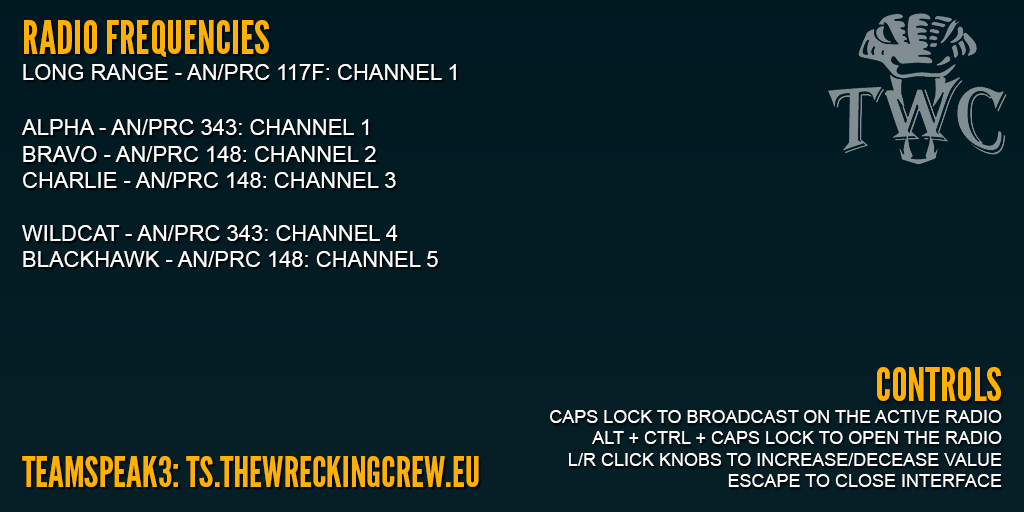
<style>
.page{position:relative;width:1024px;height:512px}
.page>*{position:absolute;margin:0}
.t1{font:22px "ArialMT";color:#ffffff;text-transform:uppercase}
.t2{font:46px "LeagueGothic";color:#feb101;text-transform:uppercase}
.t3{font:18px "ArialMT";color:#ffffff;text-transform:uppercase}
.t4{font:46px/41px "LeagueGothic";color:#feb101;text-transform:uppercase}
.t5{font:42px "LeagueGothic";color:#feb101;text-transform:uppercase}
</style>
<div class="page">
<p class="t1" style="left:22px;top:20px;width:434px;height:247px"><span class="t2">radio frequencies<br></span>long range - an/prc 117f: channel 1<br><br>alpha - AN/prc 343: channel 1<br>bravo - an/prc 148: channel 2<br>charlie - an/prc 148: channel 3<br><br>Wildcat - an/prc 343: channel 4<br>blackhawk - an/prc 148: channel 5</p>
<p class="t3" style="left:550px;top:367px;width:452px;height:120px;text-align:right"><span class="t1"><br><br></span><span class="t4">controls<br></span>caps lock to broadcast on the active radio<br>alt + ctrl + caps lock to open the radio<br>l/r click knobs to increase/decease value<br>escape to close interface</p>
<p class="t5" style="left:22px;top:456px;width:457px;height:31px">teamspeak3: ts.thewreckingcrew.eu</p>
</div>
